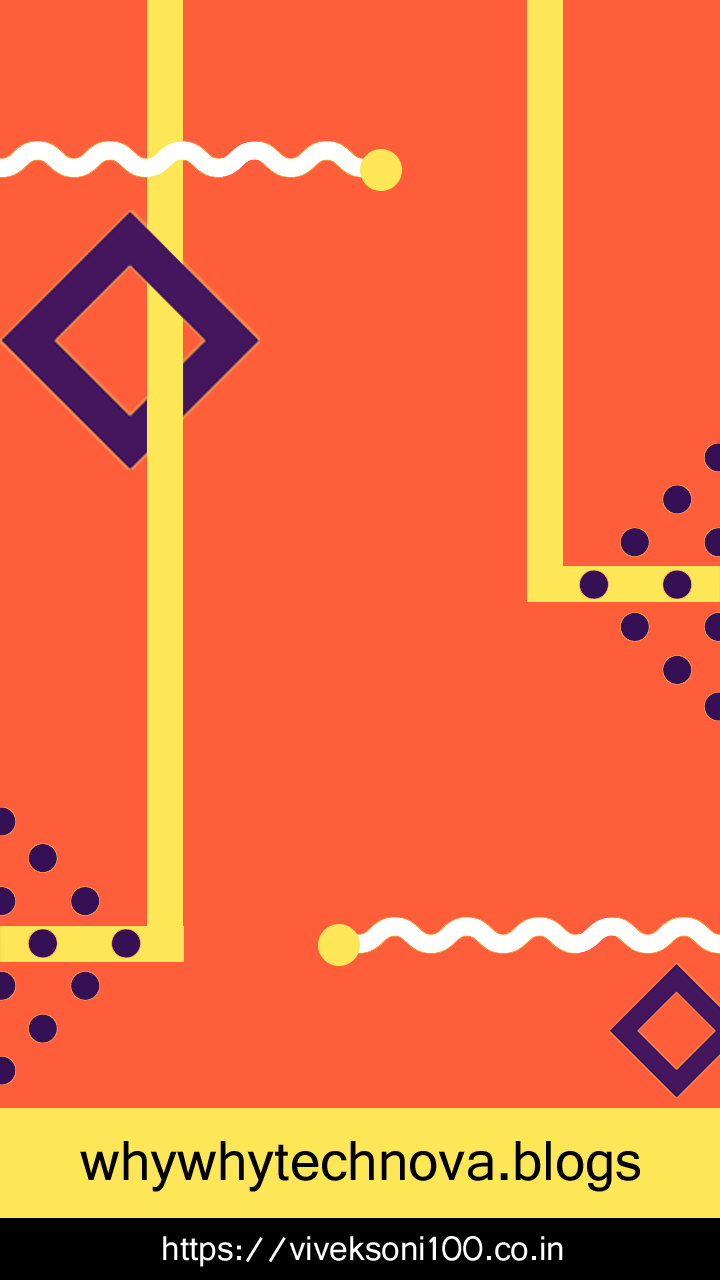
<style>
.page{position:relative;width:720px;height:1280px;background:#ff5e3b}
.page>*{position:absolute;margin:0}
.t1{font:59.1px "Shruti";color:#000000}
.t2{font:36.1px "Shruti";color:#ffffff}
</style>
<div class="page">
<p class="t1" style="left:80px;top:1141px;width:560px;height:51px">whywhytechnova.blogs</p>
<p class="t2" style="left:163px;top:1236px;width:400px;height:31px">https://viveksoni100.co.in</p>
</div>
